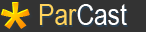
<style>
.page{position:relative;width:146px;height:32px;background:#333333}
.page>*{position:absolute;margin:0}
.t1{font:30px "ArialNarrow";color:#ffffff}
.t2{font:30px "ArialNarrow";color:#ffd35c}
</style>
<div class="page">
<p class="t1" style="left:39px;top:4px;width:88px;height:21px"><span class="t2">Par</span>Cast</p>
</div>
